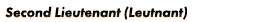
<style>
.page{position:relative;width:258px;height:22px;background:#ffffff}
.page>*{position:absolute;margin:0}
.t1{font:14px "FuturaPT-HeavyObl";color:#000000}
</style>
<div class="page">
<p class="t1" style="left:5px;top:6px;width:182px;height:14px">Second Lieutenant (Leutnant)</p>
</div>
